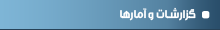
<style>
.page{position:relative;width:220px;height:30px}
.page>*{position:absolute;margin:0}
.t1{font:12px "Mj_Flow-Bold";color:#e7e7e7}
</style>
<div class="page">
<p class="t1" style="left:120px;top:7px;width:76px;height:14px">گزارشـات و آمارها</p>
</div>
